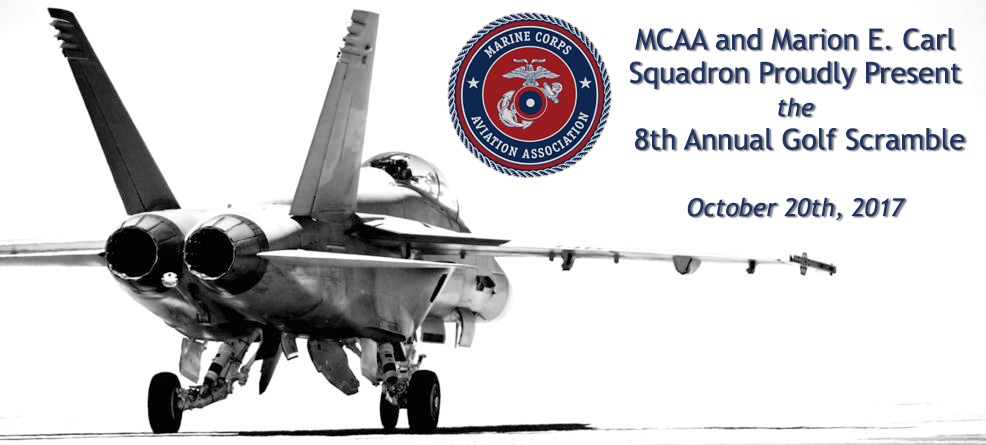
<style>
.page{position:relative;width:986px;height:445px;background:#ffffff}
.page>*{position:absolute;margin:0}
.t1{font:29.2px/33.3px "TrebuchetMS";color:#1d3666}
.t2{font:25px/33.3px "TrebuchetMS-Italic";color:#1d3666}
</style>
<div class="page">
<p class="t1" style="left:629px;top:28px;width:336px;height:193px;text-align:center">MCAA and Marion E. Carl Squadron Proudly Present<br><span class="t2">the<br></span> 8th Annual Golf Scramble<br><br><span class="t2">October 20th, 2017</span></p>
</div>
